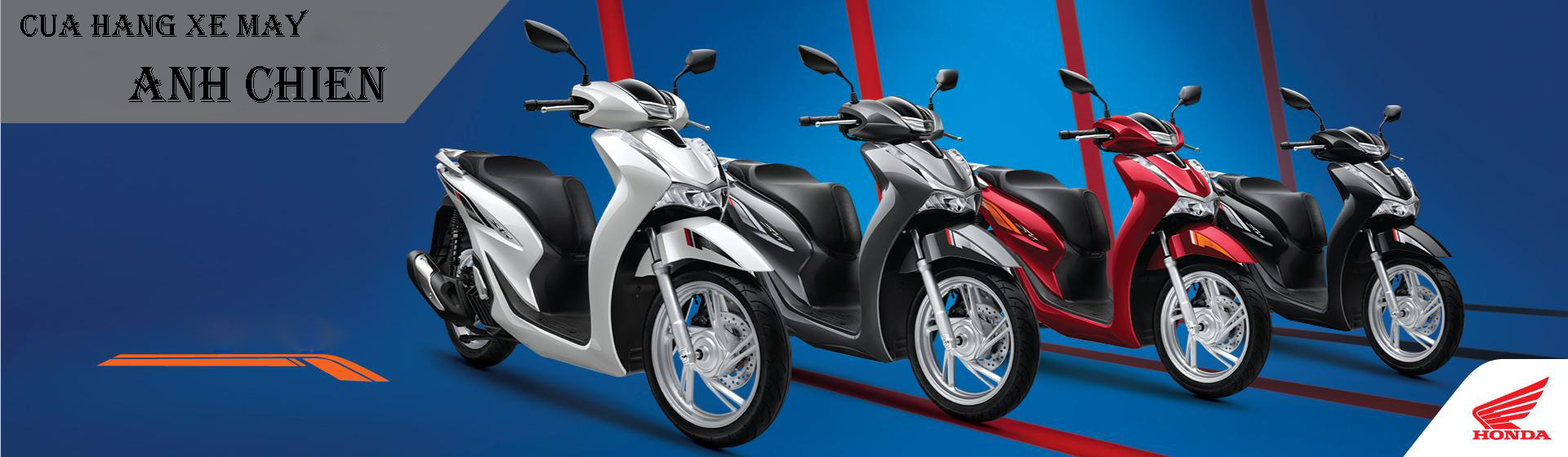
<style>
.page{position:relative;width:1568px;height:457px}
.page>*{position:absolute;margin:0}
.t1{font:32.7px "Algerian";color:#000000}
.t2{font:52.3px "Algerian";color:#000000}
</style>
<div class="page">
<p class="t1" style="left:20px;top:10px;width:289px;height:27px">cua hang xe may</p>
<p class="t2" style="left:128px;top:66px;width:259px;height:37px">Anh Chien</p>
</div>
